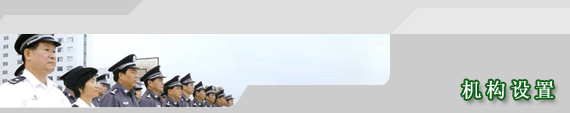
<style>
.page{position:relative;width:570px;height:113px;background:#cccccc}
.page>*{position:absolute;margin:0}
.t1{font:20px "System";letter-spacing:0.2em;color:#ffffff}
</style>
<div class="page">
<p class="t1" style="left:462px;top:80px;width:92px;height:19px">机构设置</p>
</div>
